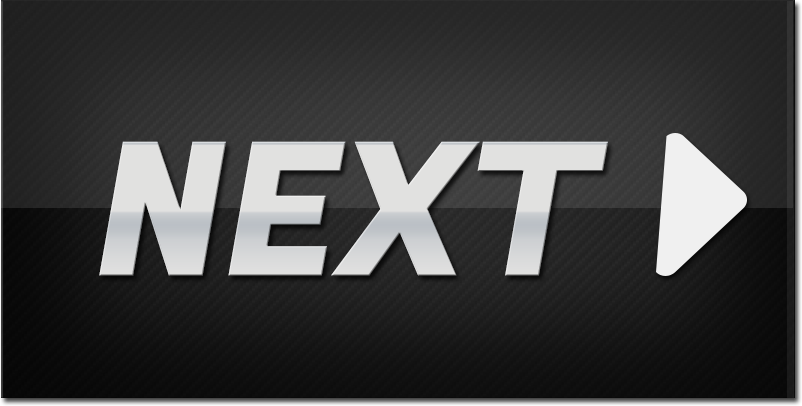
<style>
.page{position:relative;width:802px;height:406px}
.page>*{position:absolute;margin:0}
.t1{font:185.2px "FugazOne-Regular";color:#dfdfdf}
</style>
<div class="page">
<p class="t1" style="left:99px;top:141px;width:509px;height:135px">NEXT</p>
</div>
